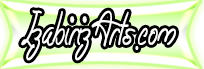
<style>
.page{position:relative;width:204px;height:69px}
.page>*{position:absolute;margin:0}
.t1{font:33px "Easy-Rider";color:#fdfdfd;font-weight:bold;scale:0.59 1}
.t2{font:33px "Ebrima";color:#fdfdfd;font-weight:bold;scale:0.59 1}
</style>
<div class="page">
<p class="t1" style="left:21px;top:10px;width:155px;height:51px">IzabirizArts<span class="t2">.</span>com</p>
</div>
